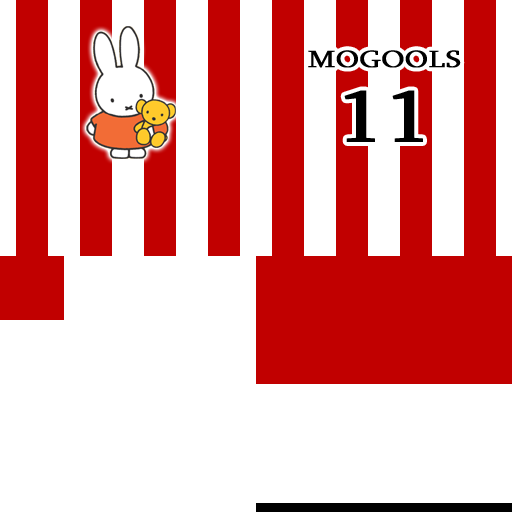
<style>
.page{position:relative;width:512px;height:512px;background:#ffffff}
.page>*{position:absolute;margin:0}
.t1{font:24.2px/74.2px "Sylfaen";color:#000000;font-weight:bold;scale:1.24 1}
.t2{font:74.2px/74.2px "Sylfaen";color:#000000;font-weight:bold;scale:1.24 1}
</style>
<div class="page">
<p class="t1" style="left:308px;top:50px;width:153px;height:92px;text-align:center">MOGOOLS<br><span class="t2">11</span></p>
</div>
